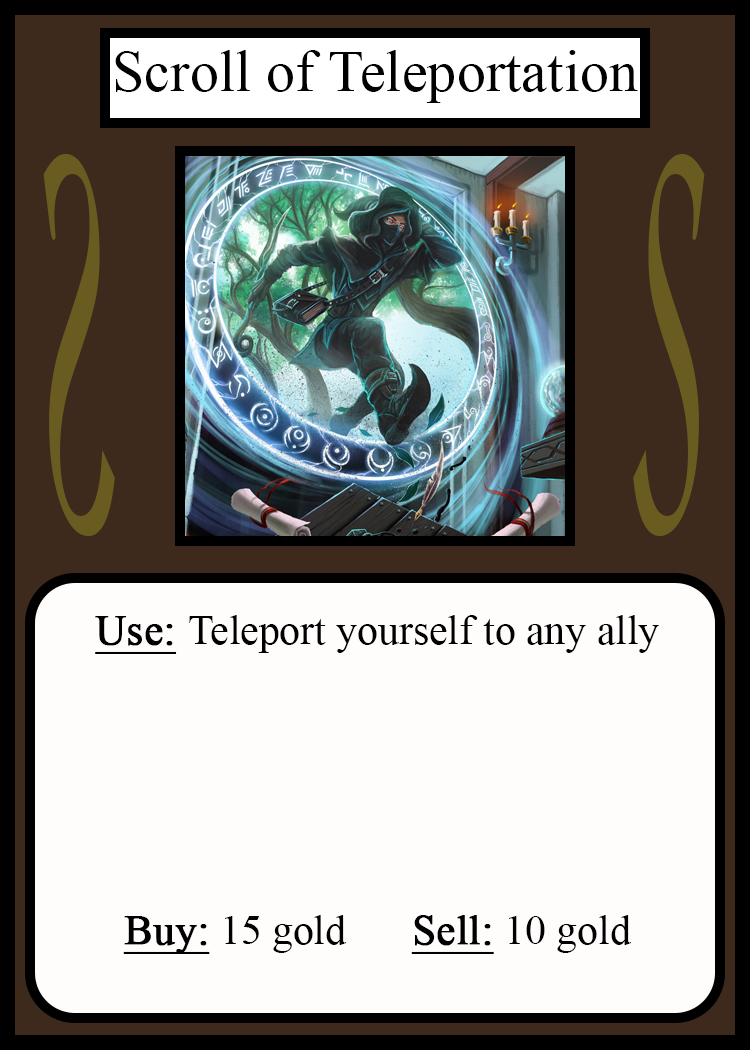
<style>
.page{position:relative;width:750px;height:1050px;background:#fffcfc}
.page>*{position:absolute;margin:0}
.t1{font:58.3px "TimesNewRomanPSMT";color:#010101}
.t2{font:548.5px "Apple-Chancery";color:#6a5c21;scale:0.27 1}
.t3{font:548.2px "Apple-Chancery";color:#6a5c21;scale:0.27 1}
.t4{font:41.7px "TimesNewRomanPSMT";color:#000000}
.t5{font:41.7px "TimesNewRomanPSMT";color:#000000;font-weight:bold;text-decoration:underline}
</style>
<div class="page">
<p class="t1" style="left:115px;top:50px;width:523px;height:53px">Scroll of Teleportation</p>
<p class="t2" style="left:43px;top:154px;width:72px;height:382px;rotate:180deg">S</p>
<p class="t3" style="left:633px;top:154px;width:72px;height:382px">S</p>
<p class="t4" style="left:95px;top:615px;width:564px;height:339px;text-align:center"><span class="t5">Use: </span>Teleport yourself to any ally<br><br><br><br><br><br><span class="t5">Buy:</span> 15 gold   <span class="t5">Sell:</span> 10 gold</p>
</div>
